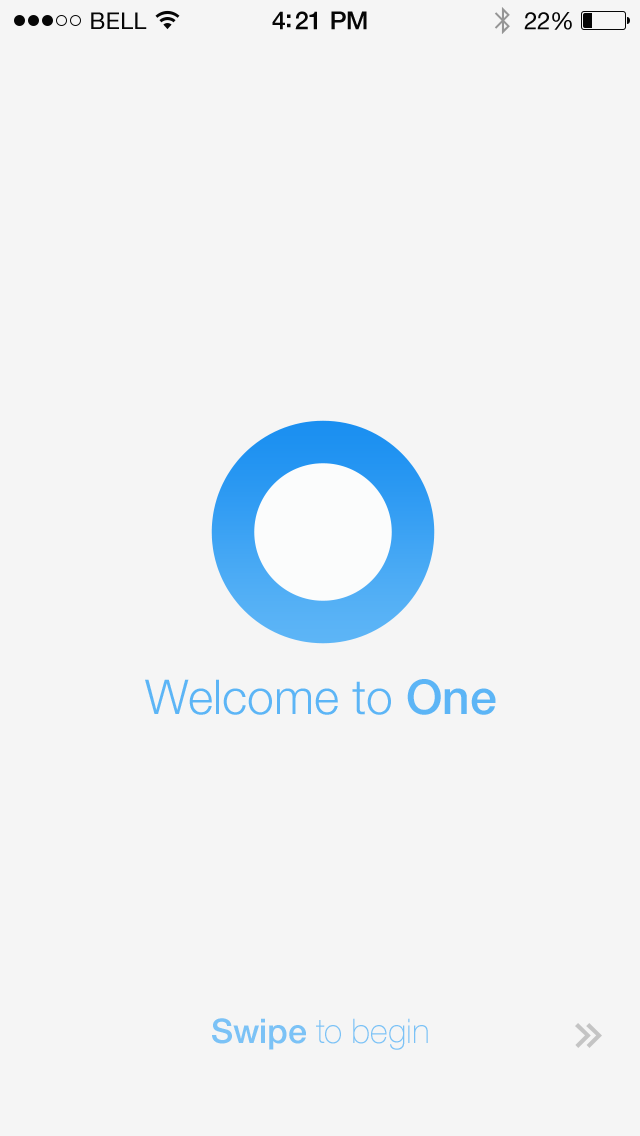
<style>
.page{position:relative;width:640px;height:1136px;background:#f5f5f5}
.page>*{position:absolute;margin:0}
.t1{font:23px "HelveticaNeue";letter-spacing:0.02em;color:#060606}
.t2{font:25px "HelveticaNeue-Medium";letter-spacing:-0.02em;color:#060606}
.t3{font:24px "HelveticaNeue";letter-spacing:-0.02em;color:#060606}
.t4{font:48px "HelveticaNeue-Light";color:#5cb5f6}
.t5{font:48px "HelveticaNeue-Medium";color:#5cb5f6}
.t6{font:34px "HelveticaNeue-Thin";color:#7bc2f6}
.t7{font:34px "HelveticaNeue-Medium";color:#7bc2f6}
</style>
<div class="page">
<p class="t1" style="left:91px;top:12px;width:56px;height:17px">BELL</p>
<p class="t2" style="left:272px;top:11px;width:95px;height:19px">4:21 PM</p>
<p class="t3" style="left:524px;top:12px;width:48px;height:18px">22%</p>
<p class="t4" style="left:145px;top:679px;width:351px;height:36px">Welcome to <span class="t5">One</span></p>
<p class="t6" style="left:212px;top:1018px;width:216px;height:32px"><span class="t7">Swipe </span>to begin</p>
</div>
